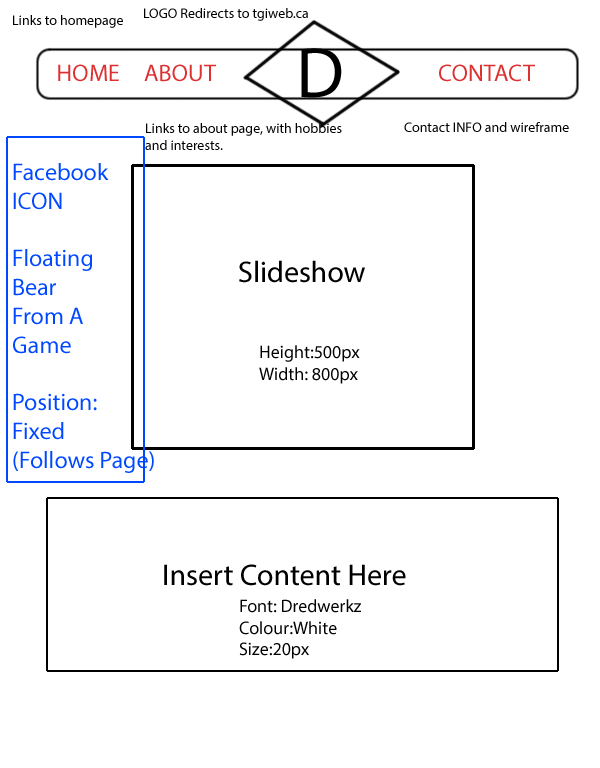
<style>
.page{position:relative;width:600px;height:768px;background:#ffffff}
.page>*{position:absolute;margin:0}
.t1{font:14px "MyriadPro-Regular";color:#000000}
.t2{font:72px "MyriadPro-Regular";color:#000000}
.t3{font:24px "MyriadPro-Regular";color:#dd3131}
.t4{font:24px "MyriadPro-Regular";color:#0048ff}
.t5{font:30px "MyriadPro-Regular";color:#000000}
.t6{font:18px "MyriadPro-Regular";color:#000000}
</style>
<div class="page">
<p class="t1" style="left:13px;top:15px;width:110px;height:13px">Links to homepage</p>
<p class="t1" style="left:144px;top:8px;width:164px;height:13px">LOGO Redirects to tgiweb.ca</p>
<p class="t2" style="left:301px;top:48px;width:41px;height:50px">D</p>
<p class="t3" style="left:58px;top:64px;width:61px;height:18px">HOME</p>
<p class="t3" style="left:144px;top:64px;width:72px;height:18px">ABOUT</p>
<p class="t3" style="left:439px;top:64px;width:96px;height:18px">CONTACT</p>
<p class="t1" style="left:145px;top:123px;width:197px;height:27px">Links to about page, with hobbies<br>and interests.</p>
<p class="t1" style="left:404px;top:122px;width:165px;height:10px">Contact INFO and wireframe</p>
<p class="t4" style="left:13px;top:163px;width:141px;height:310px">Facebook <br>ICON<br><br>Floating <br>Bear<br>From A<br>Game<br><br>Position:<br>Fixed <br>(Follows Page)</p>
<p class="t5" style="left:239px;top:260px;width:126px;height:23px">Slideshow</p>
<p class="t6" style="left:259px;top:345px;width:101px;height:39px">Height:500px<br>Width: 800px</p>
<p class="t5" style="left:164px;top:564px;width:242px;height:22px">Insert Content Here</p>
<p class="t6" style="left:239px;top:599px;width:122px;height:60px">Font: Dredwerkz<br>Colour:White<br>Size:20px</p>
</div>
